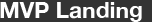
<style>
.page{position:relative;width:152px;height:22px;background:#333333}
.page>*{position:absolute;margin:0}
.t1{font:22.2px "HelveticaNeue-Bold";color:#ffffff}
</style>
<div class="page">
<p class="t1" style="left:0px;top:2px;width:142px;height:20px">MVP Landing</p>
</div>
